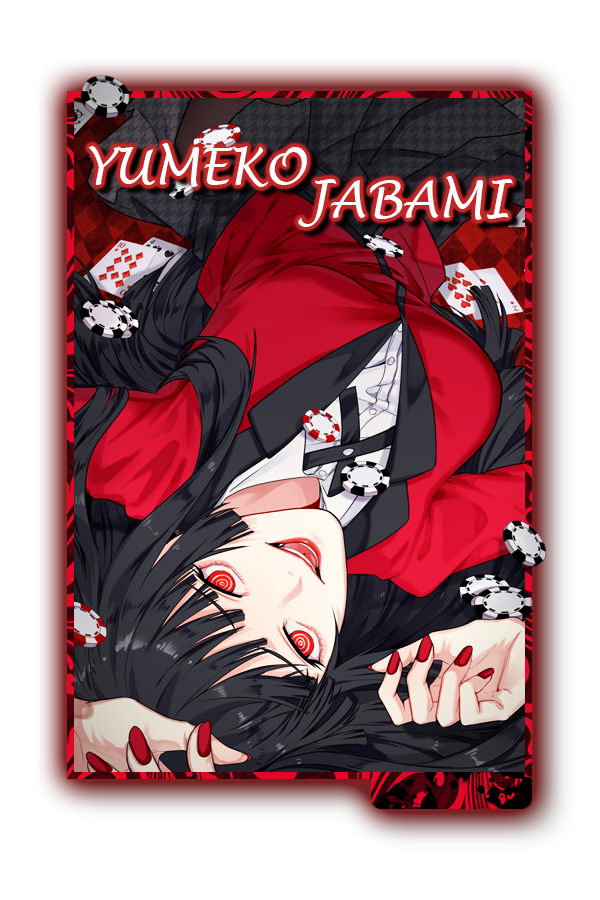
<style>
.page{position:relative;width:600px;height:900px;background:#ffffff}
.page>*{position:absolute;margin:0}
.t1{font:50px "LucidaHandwriting-Italic";color:#ffffff;scale:0.96 1}
</style>
<div class="page">
<p class="t1" style="left:88px;top:143px;width:219px;height:44px">YUMEKO</p>
<p class="t1" style="left:298px;top:176px;width:215px;height:51px">JABAMI</p>
</div>
